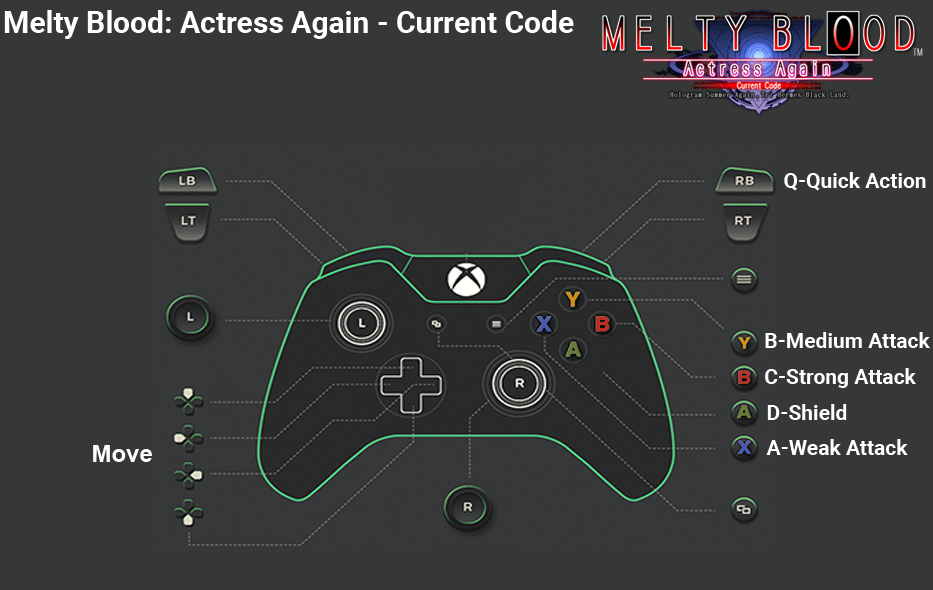
<style>
.page{position:relative;width:933px;height:590px;background:#363838}
.page>*{position:absolute;margin:0}
.t1{font:30px "Roboto-Bold";color:#ffffff}
.t2{font:21px "Roboto-Bold";color:#ffffff}
.t3{font:24px "Arial-BoldMT";color:#fefefe}
</style>
<div class="page">
<p class="t1" style="left:4px;top:10px;width:570px;height:29px">Melty Blood: Actress Again - Current Code</p>
<p class="t2" style="left:784px;top:172px;width:142px;height:19px">Q-Quick Action</p>
<p class="t2" style="left:765px;top:332px;width:165px;height:16px">B-Medium Attack</p>
<p class="t2" style="left:765px;top:368px;width:151px;height:20px">C-Strong Attack</p>
<p class="t2" style="left:767px;top:404px;width:80px;height:16px">D-Shield</p>
<p class="t3" style="left:93px;top:445px;width:59px;height:17px">Move</p>
<p class="t2" style="left:766px;top:439px;width:142px;height:16px">A-Weak Attack</p>
</div>
